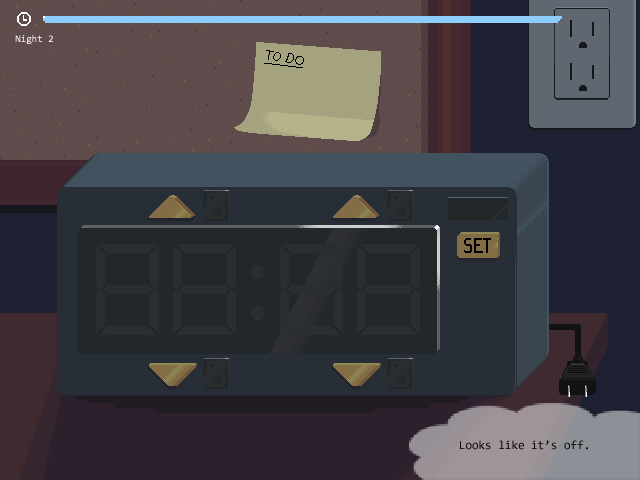
<style>
.page{position:relative;width:640px;height:480px}
.page>*{position:absolute;margin:0}
.t1{font:10px "Consolas";color:#ffffff}
.t2{font:12px "Consolas";color:#000000}
</style>
<div class="page">
<p class="t1" style="left:15px;top:35px;width:38px;height:9px">Night 2</p>
<p class="t2" style="left:460px;top:440px;width:128px;height:10px">Looks like it’s off.</p>
</div>
